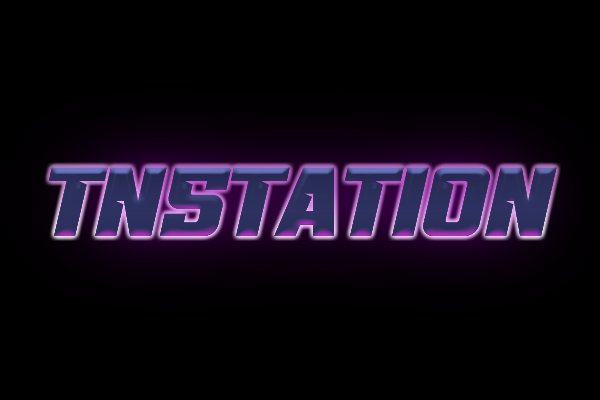
<style>
.page{position:relative;width:600px;height:400px;background:#000000}
.page>*{position:absolute;margin:0}
.t1{font:98.1px "SpeedDemonRegular";letter-spacing:-0.015em;color:#2c305e}
</style>
<div class="page">
<p class="t1" style="left:49px;top:167px;width:508px;height:69px">tnstation</p>
</div>
